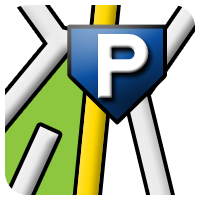
<style>
.page{position:relative;width:200px;height:200px;background:#ffffff}
.page>*{position:absolute;margin:0}
.t1{font:93.5px "TAPEMAN";color:#ffffff}
</style>
<div class="page">
<p class="t1" style="left:98px;top:34px;width:51px;height:64px">P</p>
</div>
